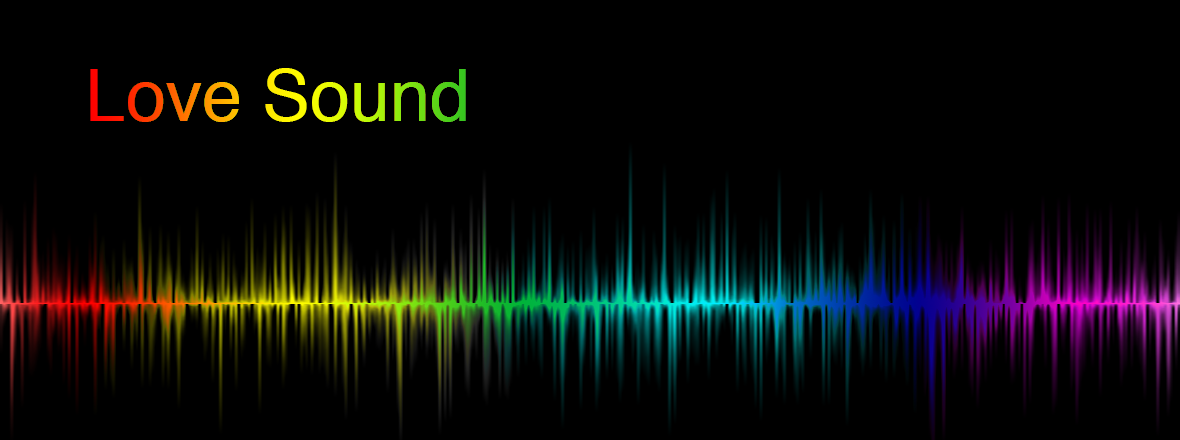
<style>
.page{position:relative;width:1180px;height:440px;background:#000000}
.page>*{position:absolute;margin:0}
.t1{font:72px "Helvetica"}
</style>
<div class="page">
<p class="t1" style="left:90px;top:68px;width:376px;height:54px">Love Sound</p>
</div>
